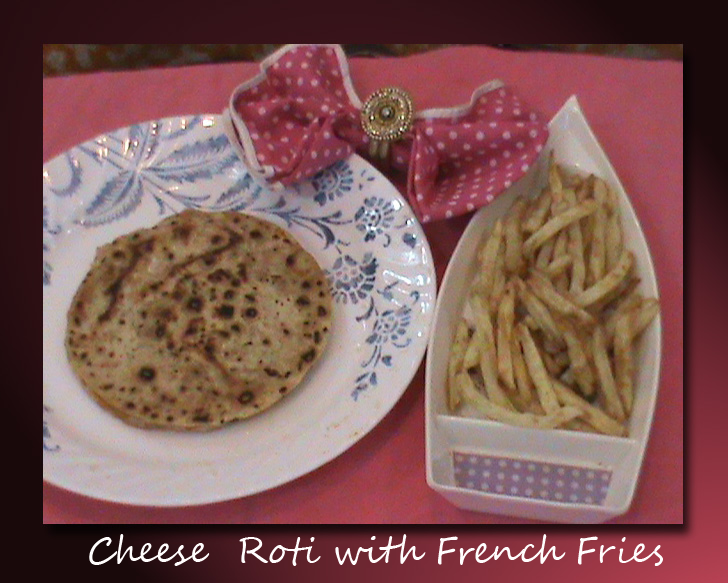
<style>
.page{position:relative;width:728px;height:583px}
.page>*{position:absolute;margin:0}
.t1{font:36px "SegoeScript";color:#fffdfd}
</style>
<div class="page">
<p class="t1" style="left:89px;top:534px;width:574px;height:32px">Cheese  Roti with French Fries</p>
</div>
